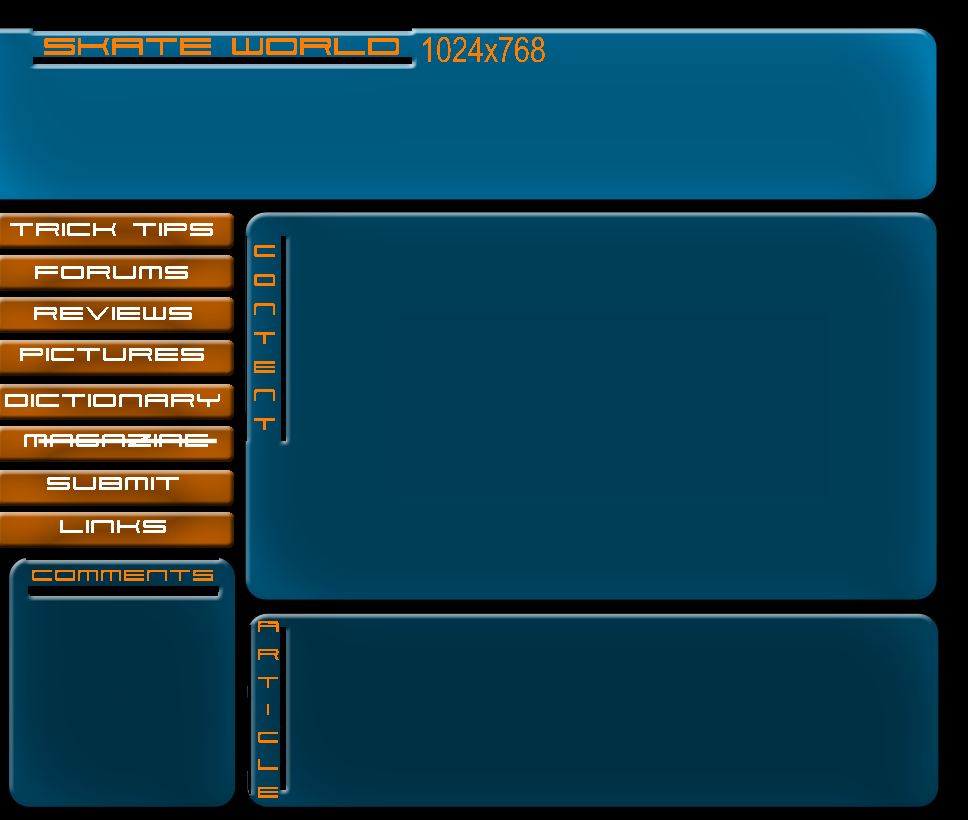
<style>
.page{position:relative;width:968px;height:820px}
.page>*{position:absolute;margin:0}
.t1{font:35px "911Porscha";color:#ff7e00}
.t2{font:35px "ArialNarrow";color:#ff7e00}
.t3{font:26px "911Porscha";color:#ffffff}
.t4{font:24px "911Porscha";color:#ff7e00}
.t5{font:23px "911Porscha";color:#ff7e00}
</style>
<div class="page">
<p class="t1" style="left:44px;top:38px;width:355px;height:17px">Skate World</p>
<p class="t2" style="left:423px;top:37px;width:122px;height:25px">1024x768</p>
<p class="t3" style="left:10px;top:223px;width:203px;height:13px">Trick Tips</p>
<p class="t4" style="left:254px;top:245px;width:21px;height:185px;text-align:center">c<br>o<br>n<br>t<br>e<br>n<br>t</p>
<p class="t3" style="left:35px;top:266px;width:153px;height:13px">forums</p>
<p class="t3" style="left:34px;top:307px;width:158px;height:13px">reviews</p>
<p class="t3" style="left:20px;top:348px;width:184px;height:13px">pictures</p>
<p class="t3" style="left:5px;top:394px;width:215px;height:13px">dictionary</p>
<p class="t3" style="left:24px;top:434px;width:184px;height:13px">Magazine</p>
<p class="t3" style="left:47px;top:477px;width:132px;height:13px">submit</p>
<p class="t3" style="left:60px;top:520px;width:106px;height:13px">links</p>
<p class="t5" style="left:32px;top:570px;width:181px;height:11px">comments</p>
<p class="t5" style="left:258px;top:621px;width:21px;height:177px;text-align:center">a<br>r<br>t<br>i<br>c<br>l<br>e</p>
</div>
